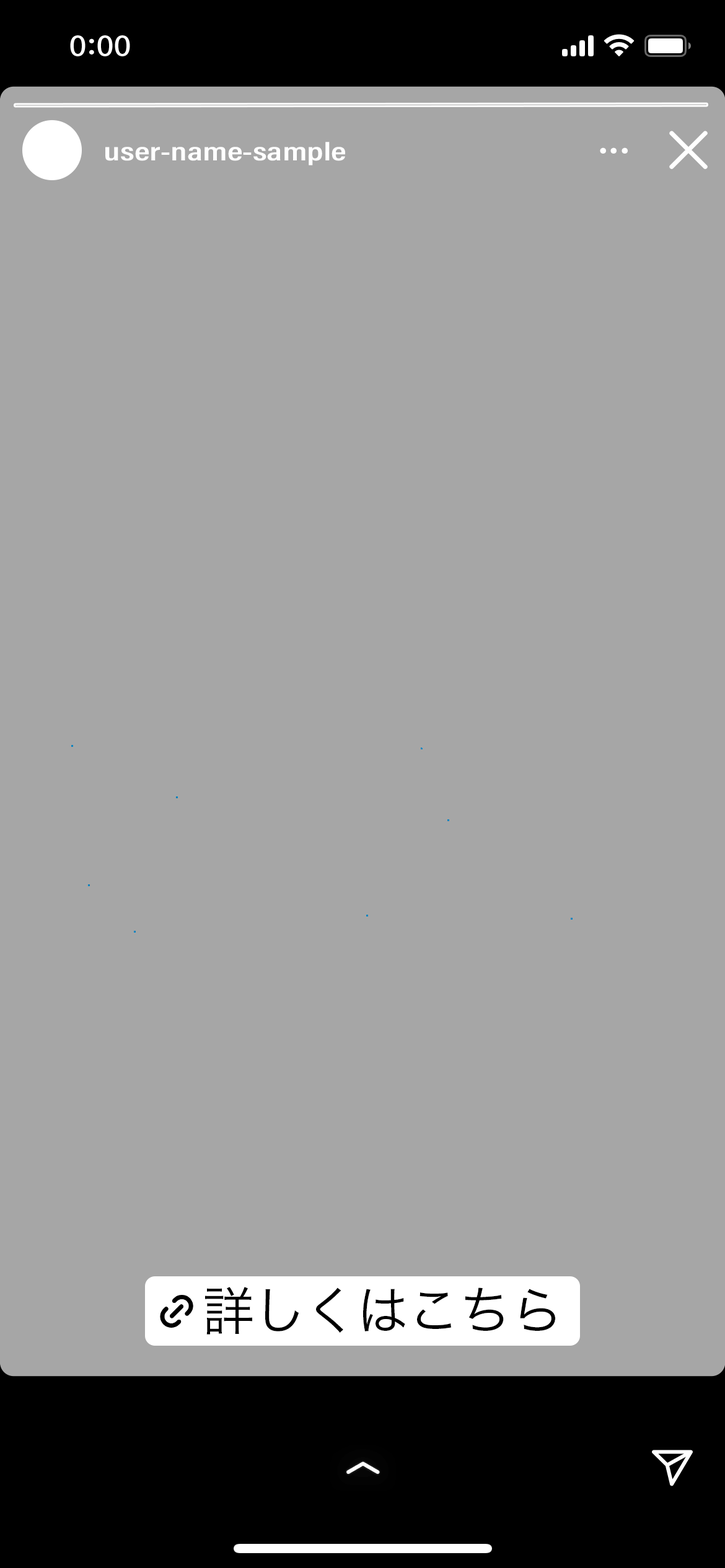
<style>
.page{position:relative;width:725px;height:1568px;background:#a6a6a6}
.page>*{position:absolute;margin:0}
.t1{font:68.1px "UDDigiKyokashoPro-Regular";color:#ffffff}
.t2{font:25.9px "AcuminConcept-CondensedSemibold";color:#ffffff;scale:1.39 1}
.t3{font:44.6px "KozGoPr6N-Regular";color:#ffffff;scale:1.11 1}
.t4{font:52.6px "HiraKakuPro-W3";letter-spacing:-0.025em;color:#000000}
</style>
<div class="page">
<p class="t1" style="left:669px;top:131px;width:38px;height:38px">×</p>
<p class="t2" style="left:105px;top:142px;width:240px;height:23px">user-name-sample</p>
<p class="t3" style="left:599px;top:147px;width:28px;height:7px">...</p>
<p class="t4" style="left:205px;top:1287px;width:350px;height:48px">詳しくはこちら</p>
</div>
